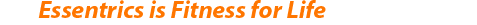
<style>
.page{position:relative;width:477px;height:25px;background:#ffffff}
.page>*{position:absolute;margin:0}
.t1{font:11.9px "MyriadPro-BoldIt";color:#ff7600}
</style>
<div class="page">
<p class="t1" style="left:38px;top:0px;width:288px;height:18px">Essentrics is Fitness for Life</p>
</div>
